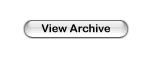
<style>
.page{position:relative;width:156px;height:59px;background:#ffffff}
.page>*{position:absolute;margin:0}
.t1{font:11px "ArialRoundedMTBold";color:#000000}
</style>
<div class="page">
<p class="t1" style="left:41px;top:24px;width:69px;height:9px">View Archive</p>
</div>
